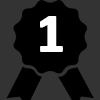
<style>
.page{position:relative;width:100px;height:100px;background:#000000}
.page>*{position:absolute;margin:0}
.t1{font:54.8px "Calibri-Bold";color:#ffffff;font-weight:bold}
</style>
<div class="page">
<p class="t1" style="left:40px;top:16px;width:23px;height:36px">1</p>
</div>
